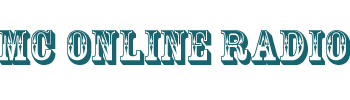
<style>
.page{position:relative;width:350px;height:100px;background:#ffffff}
.page>*{position:absolute;margin:0}
.t1{font:11.2px "RosewoodStd-Regular";color:#18646f}
</style>
<div class="page">
<p class="t1" style="left:0px;top:30px;width:351px;height:35px">MC Online Radio</p>
</div>
